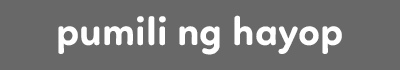
<style>
.page{position:relative;width:400px;height:70px;background:#686868}
.page>*{position:absolute;margin:0}
.t1{font:40px "Linotte-Bold";color:#ffffff}
</style>
<div class="page">
<p class="t1" style="left:58px;top:15px;width:284px;height:40px">pumili ng hayop</p>
</div>
